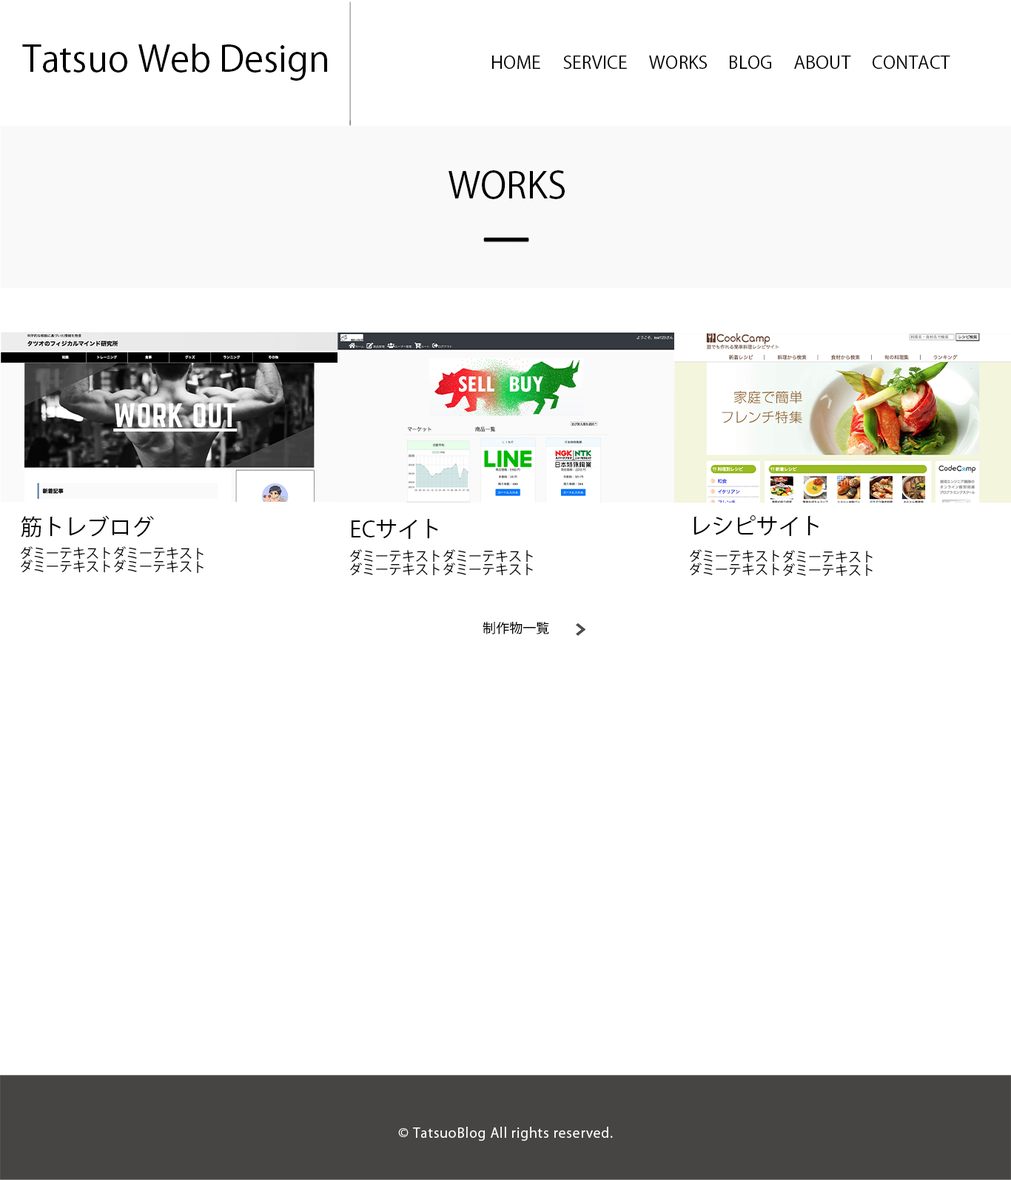
<style>
.page{position:relative;width:1011px;height:1180px;background:#ffffff}
.page>*{position:absolute;margin:0}
.t1{font:35.5px "KozGoPr6N-Regular";color:#000000}
.t2{font:17.5px "KozGoPr6N-Regular";color:#000000}
.t3{font:22.2px "KozGoPr6N-Regular";color:#000000}
.t4{font:13.3px/13.3px "KozGoPr6N-Regular";color:#000000}
.t5{font:13.3px "KozGoPr6N-Regular";color:#000000}
.t6{font:13.3px "KozGoPr6N-Regular";letter-spacing:0.05em;color:#ffffff}
</style>
<div class="page">
<p class="t1" style="left:22px;top:44px;width:305px;height:37px">Tatsuo Web Design</p>
<p class="t2" style="left:492px;top:56px;width:48px;height:13px">HOME</p>
<p class="t2" style="left:563px;top:56px;width:64px;height:13px">SERVICE</p>
<p class="t2" style="left:649px;top:56px;width:58px;height:13px">WORKS</p>
<p class="t2" style="left:730px;top:56px;width:41px;height:13px">BLOG</p>
<p class="t2" style="left:794px;top:56px;width:57px;height:13px">ABOUT</p>
<p class="t2" style="left:872px;top:56px;width:78px;height:13px">CONTACT</p>
<p class="t1" style="left:448px;top:170px;width:117px;height:29px">WORKS</p>
<p class="t3" style="left:21px;top:515px;width:133px;height:22px">筋トレブログ</p>
<p class="t3" style="left:352px;top:519px;width:86px;height:20px">ECサイト</p>
<p class="t3" style="left:693px;top:515px;width:125px;height:22px">レシピサイト</p>
<p class="t4" style="left:21px;top:546px;width:183px;height:28px">ダミーテキストダミーテキスト<br>ダミーテキストダミーテキスト</p>
<p class="t4" style="left:350px;top:549px;width:183px;height:27px">ダミーテキストダミーテキスト<br>ダミーテキストダミーテキスト</p>
<p class="t4" style="left:690px;top:549px;width:182px;height:27px">ダミーテキストダミーテキスト<br>ダミーテキストダミーテキスト</p>
<p class="t5" style="left:482px;top:621px;width:67px;height:13px">制作物一覧</p>
<p class="t6" style="left:398px;top:1126px;width:215px;height:14px">© TatsuoBlog All rights reserved.</p>
</div>
